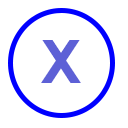
<style>
.page{position:relative;width:128px;height:128px;background:#ffffff}
.page>*{position:absolute;margin:0}
.t1{font:60px "Arial-BoldMT";color:#5d60d6}
</style>
<div class="page">
<p class="t1" style="left:41px;top:40px;width:40px;height:43px">X</p>
</div>
